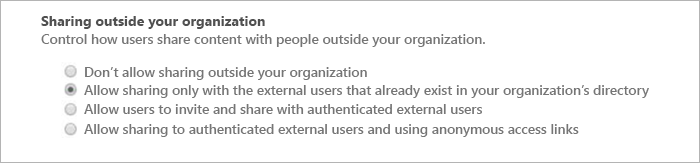
<style>
.page{position:relative;width:700px;height:163px;background:#ffffff}
.page>*{position:absolute;margin:0}
.t1{font:14px "SegoeUI-Bold";color:#505050}
.t2{font:13.7px "SegoeUI-Semibold";color:#757575}
.t3{font:13.6px "SegoeUI-Semibold";color:#757575}
</style>
<div class="page">
<p class="t1" style="left:41px;top:16px;width:224px;height:13px">Sharing outside your organization</p>
<p class="t2" style="left:41px;top:34px;width:444px;height:13px">Control how users share content with people outside your organization.</p>
<p class="t3" style="left:85px;top:67px;width:282px;height:13px">Don’t allow sharing outside your organization</p>
<p class="t3" style="left:84px;top:85px;width:565px;height:13px">Allow sharing only with the external users that already exist in your organization’s directory</p>
<p class="t3" style="left:84px;top:104px;width:398px;height:10px">Allow users to invite and share with authenticated external users</p>
<p class="t3" style="left:84px;top:124px;width:495px;height:13px">Allow sharing to authenticated external users and using anonymous access links</p>
</div>
